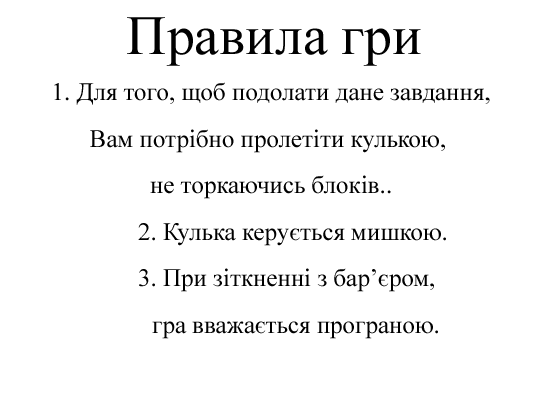
<style>
.page{position:relative;width:551px;height:394px;background:#ffffff}
.page>*{position:absolute;margin:0}
.t1{font:55.6px "TimesNewRomanPSMT";color:#000000}
.t2{font:25px/46.5px "TimesNewRomanPSMT";color:#000000}
</style>
<div class="page">
<p class="t1" style="left:127px;top:17px;width:294px;height:49px">Правила гри</p>
<p class="t2" style="left:54px;top:82px;width:436px;height:257px;text-align:center">1. Для того, щоб подолати дане завдання,<br>Вам потрібно пролетіти кулькою, <br>не торкаючись блоків..<br>       2. Кулька керується мишкою.<br>     3. При зіткненні з бар’єром,<br>        гра вважається програною.</p>
</div>
